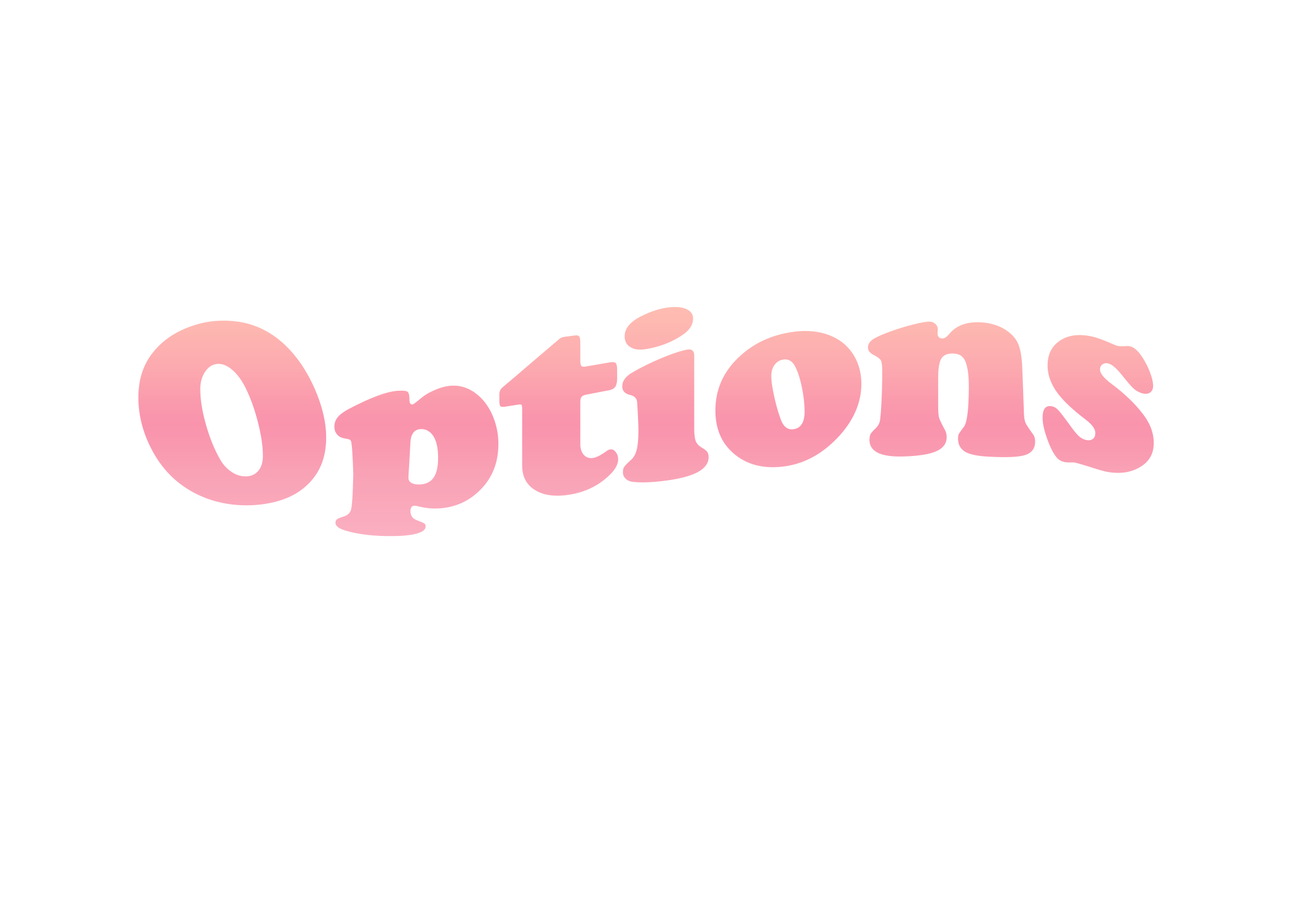
<style>
.page{position:relative;width:1292px;height:923px;background:#ffffff}
.page>*{position:absolute;margin:0}
.t1{font:256.4px "CooperBlack";color:#fa9faf}
</style>
<div class="page">
<p class="t1" style="left:138px;top:306px;width:1016px;height:231px">Options</p>
</div>
